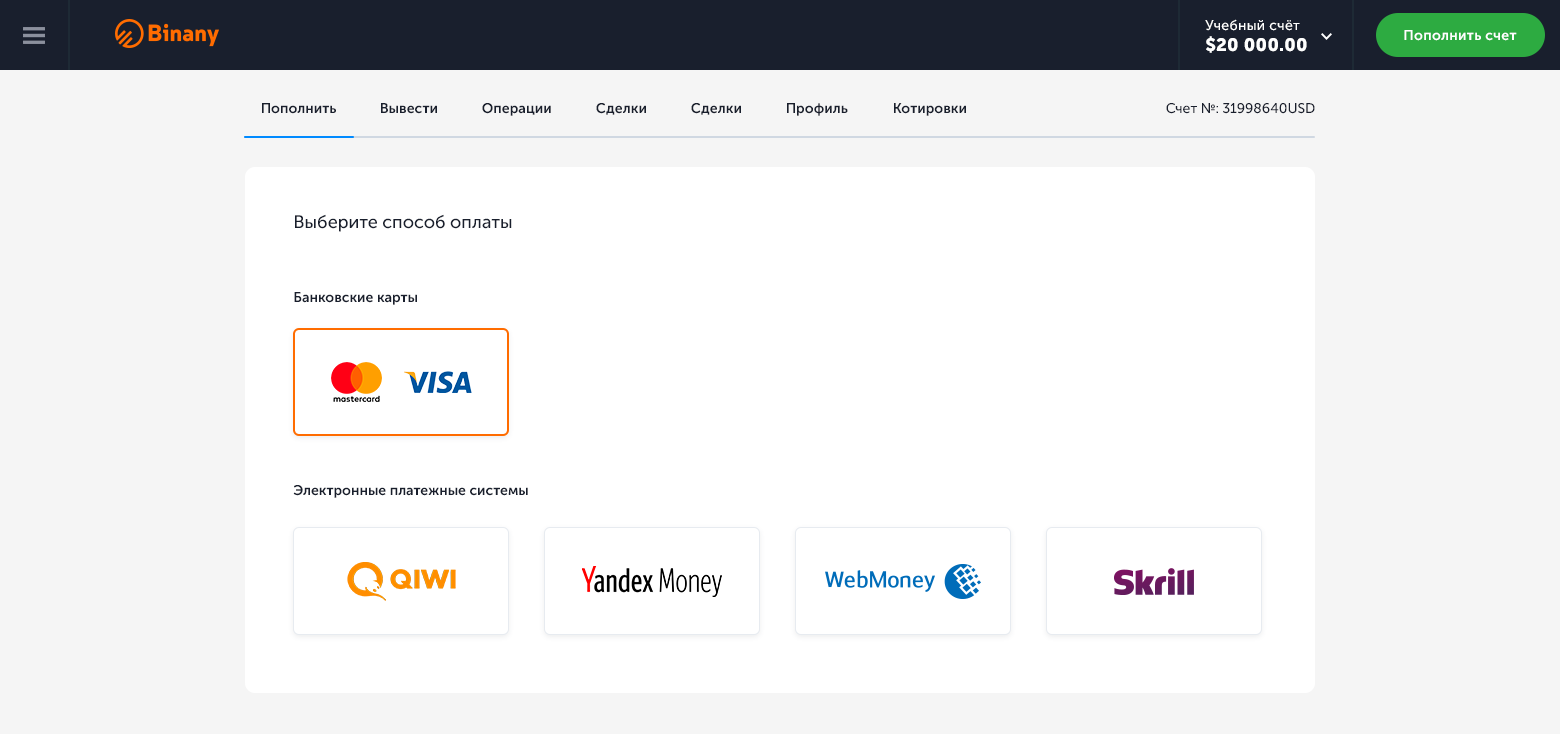
<style>
.page{position:relative;width:1560px;height:734px;background:#ffffff}
.page>*{position:absolute;margin:0}
.t1{font:14px "MuseoSansCyrl-500";letter-spacing:0.02em;color:#ffffff}
.t2{font:18px "MuseoSansCyrl-900";letter-spacing:0.02em;color:#ffffff}
.t3{font:14px "MuseoSansCyrl-700";letter-spacing:0.02em;color:#ffffff}
.t4{font:14px "MuseoSansCyrl-700";color:#191f2d}
.t5{font:14px "MuseoSansCyrl-500";color:#191f2d}
.t6{font:18px "MuseoSansCyrl-500";color:#191f2d}
</style>
<div class="page">
<p class="t1" style="left:1205px;top:19px;width:102px;height:34px">Учебный счёт<br><span class="t2">$20 000.00</span></p>
<p class="t3" style="left:1404px;top:30px;width:113px;height:11px">Пополнить счет</p>
<p class="t4" style="left:262px;top:103px;width:74px;height:11px">Пополнить</p>
<p class="t4" style="left:381px;top:103px;width:56px;height:11px">Вывести</p>
<p class="t4" style="left:482px;top:103px;width:69px;height:13px">Операции</p>
<p class="t4" style="left:596px;top:103px;width:50px;height:12px">Сделки</p>
<p class="t4" style="left:691px;top:103px;width:50px;height:12px">Сделки</p>
<p class="t4" style="left:787px;top:103px;width:61px;height:13px">Профиль</p>
<p class="t4" style="left:894px;top:103px;width:72px;height:13px">Котировки</p>
<p class="t5" style="left:1166px;top:103px;width:149px;height:11px">Счет №: 31998640USD</p>
<p class="t6" style="left:295px;top:214px;width:217px;height:18px">Выберите способ оплаты</p>
<p class="t4" style="left:294px;top:292px;width:123px;height:13px">Банковские карты</p>
<p class="t4" style="left:293px;top:485px;width:235px;height:13px">Электронные платежные системы</p>
</div>
